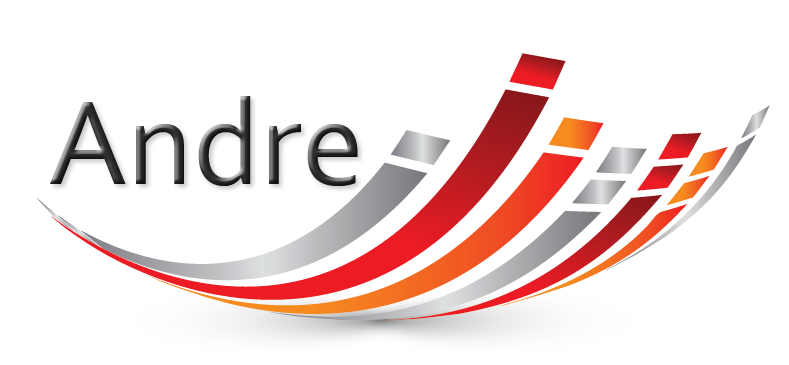
<style>
.page{position:relative;width:789px;height:365px;background:#ffffff}
.page>*{position:absolute;margin:0}
.t1{font:125px "Corbel"}
</style>
<div class="page">
<p class="t1" style="left:50px;top:96px;width:308px;height:90px">Andre</p>
</div>
